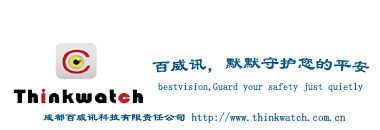
<style>
.page{position:relative;width:380px;height:130px;background:#ffffff}
.page>*{position:absolute;margin:0}
.t1{font:18px "LiSu";color:#055686}
.t2{font:10px "LiSu";color:#055686}
.t3{font:11px "LiSu";color:#055686}
</style>
<div class="page">
<p class="t1" style="left:152px;top:57px;width:218px;height:16px">百威讯，默默守护您的平安</p>
<p class="t2" style="left:158px;top:82px;width:205px;height:10px">bestvision,Guard your safety just quietly</p>
<p class="t3" style="left:43px;top:112px;width:303px;height:11px">成都百威讯科技有限责任公司 http://www.thinkwatch.com.cn</p>
</div>
